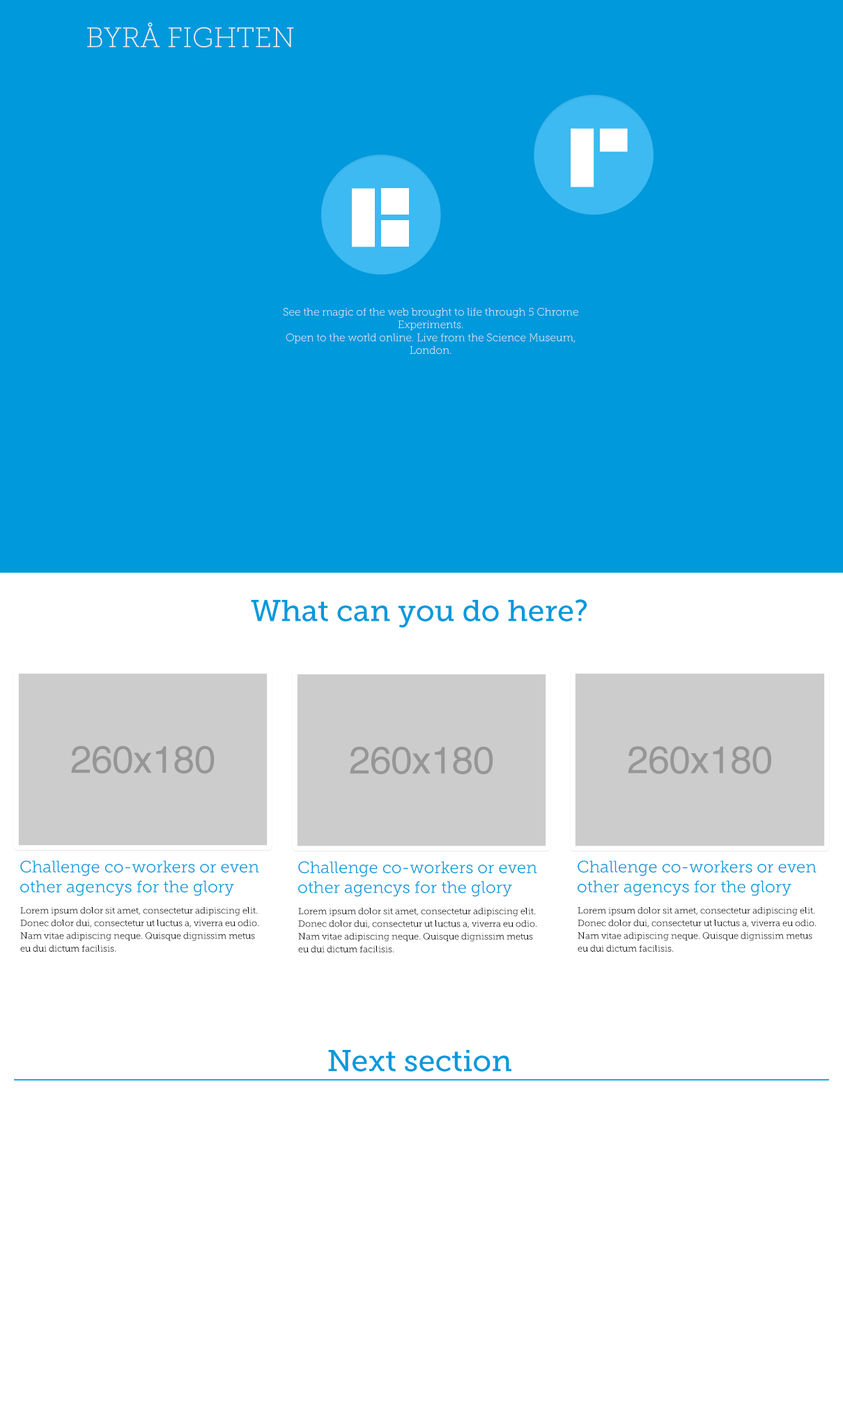
<style>
.page{position:relative;width:843px;height:1415px;background:#ffffff}
.page>*{position:absolute;margin:0}
.t1{font:27.9px "MuseoSlab-100";color:#f7f7f7}
.t2{font:10.7px "MuseoSlab-100";color:#f7f7f7}
.t3{font:30.2px "MuseoSlab-500";color:#0099dc}
.t4{font:38.1px "Helvetica";color:#969696}
.t5{font:38.3px "Helvetica";color:#969696}
.t6{font:16.6px/19.9px "MuseoSlab-300";color:#0099dc}
.t7{font:9.1px/12.7px "MuseoSlab-300";color:#000000}
</style>
<div class="page">
<p class="t1" style="left:87px;top:22px;width:207px;height:25px">BYRÅ FIGHTEN</p>
<p class="t2" style="left:284px;top:308px;width:294px;height:46px;text-align:center">See the magic of the web brought to life through 5 Chrome Experiments.<br>Open to the world online. Live from the Science Museum, London.</p>
<p class="t3" style="left:251px;top:599px;width:336px;height:29px">What can you do here?</p>
<p class="t4" style="left:71px;top:745px;width:144px;height:29px">260x180</p>
<p class="t4" style="left:350px;top:746px;width:143px;height:29px">260x180</p>
<p class="t5" style="left:628px;top:746px;width:143px;height:28px">260x180</p>
<p class="t6" style="left:20px;top:860px;width:239px;height:36px">Challenge co-workers or even <br>other agencys for the glory</p>
<p class="t6" style="left:298px;top:861px;width:239px;height:35px">Challenge co-workers or even <br>other agencys for the glory</p>
<p class="t6" style="left:577px;top:860px;width:239px;height:36px">Challenge co-workers or even <br>other agencys for the glory</p>
<p class="t7" style="left:20px;top:907px;width:239px;height:45px">Lorem ipsum dolor sit amet, consectetur adipiscing elit. Donec dolor dui, consectetur ut luctus a, viverra eu odio. Nam vitae adipiscing neque. Quisque dignissim metus eu dui dictum facilisis.</p>
<p class="t7" style="left:298px;top:908px;width:239px;height:44px">Lorem ipsum dolor sit amet, consectetur adipiscing elit. Donec dolor dui, consectetur ut luctus a, viverra eu odio. Nam vitae adipiscing neque. Quisque dignissim metus eu dui dictum facilisis.</p>
<p class="t7" style="left:577px;top:907px;width:239px;height:45px">Lorem ipsum dolor sit amet, consectetur adipiscing elit. Donec dolor dui, consectetur ut luctus a, viverra eu odio. Nam vitae adipiscing neque. Quisque dignissim metus eu dui dictum facilisis.</p>
<p class="t3" style="left:328px;top:1050px;width:183px;height:21px">Next section</p>
</div>
